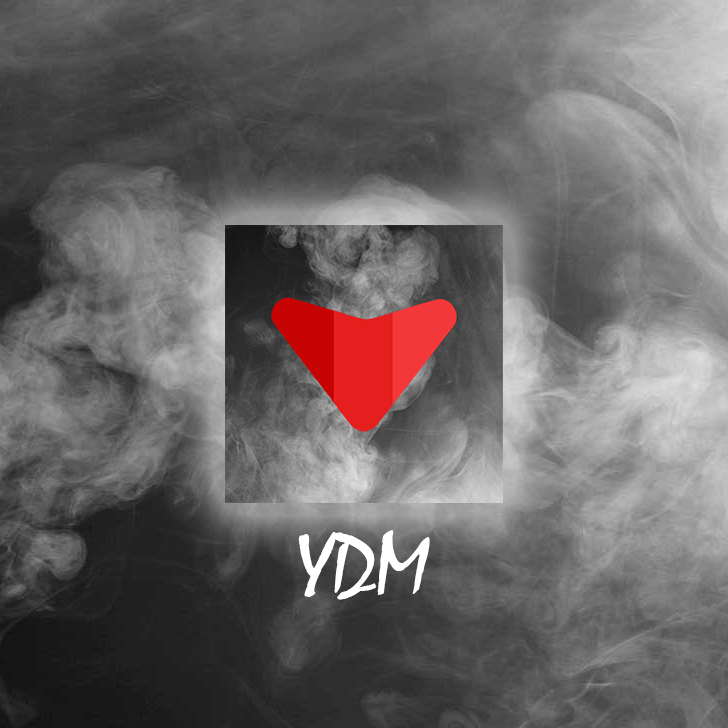
<style>
.page{position:relative;width:728px;height:728px}
.page>*{position:absolute;margin:0}
.t1{font:92.5px "Mistral";color:#ffffff}
</style>
<div class="page">
<p class="t1" style="left:298px;top:530px;width:132px;height:70px">YDM</p>
</div>
